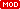
<style>
.page{position:relative;width:20px;height:9px;background:#e30000}
.page>*{position:absolute;margin:0}
.t1{font:8px "Kroeger0555";color:#ffffff;text-transform:uppercase}
</style>
<div class="page">
<p class="t1" style="left:3px;top:2px;width:15px;height:5px">mod</p>
</div>
